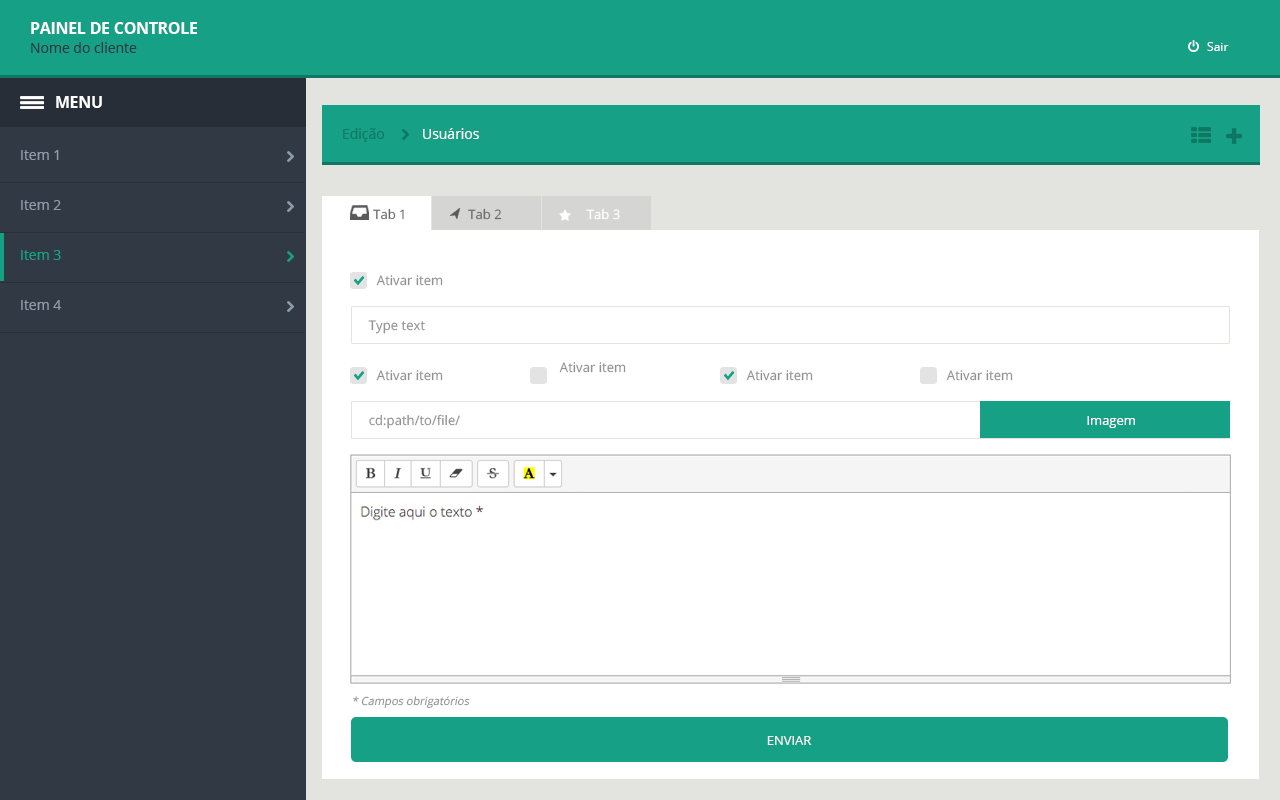
<style>
.page{position:relative;width:1280px;height:800px;background:#ffffff}
.page>*{position:absolute;margin:0}
.t1{font:15.5px "OpenSans-Bold";color:#ffffff}
.t2{font:14px "OpenSans";color:#2c3945}
.t3{font:12.1px "OpenSans";color:#ffffff}
.t4{font:14px "OpenSans";color:#0f7763}
.t5{font:14px "OpenSans";color:#fefefe}
.t6{font:14px "OpenSans";color:#8f9ba7}
.t7{font:12.9px "OpenSans";color:#6a6a6a}
.t8{font:12.9px "OpenSans";color:#ffffff}
.t9{font:14px "OpenSans";color:#16a085}
.t10{font:13.2px "OpenSans";color:#929292}
.t11{font:13px "OpenSans";color:#ffffff}
.t12{font:11.2px "OpenSans";color:#929292;font-style:italic}
.t13{font:13px "OpenSans";color:#f6f6f6}
</style>
<div class="page">
<p class="t1" style="left:31px;top:22px;width:166px;height:12px">PAINEL DE CONTROLE</p>
<p class="t2" style="left:31px;top:42px;width:106px;height:11px">Nome do cliente</p>
<p class="t3" style="left:1207px;top:42px;width:22px;height:9px">Sair</p>
<p class="t1" style="left:56px;top:96px;width:46px;height:12px">MENU</p>
<p class="t4" style="left:343px;top:128px;width:41px;height:14px">Edição</p>
<p class="t5" style="left:423px;top:128px;width:56px;height:11px">Usuários</p>
<p class="t6" style="left:21px;top:150px;width:38px;height:10px">Item 1</p>
<p class="t6" style="left:21px;top:200px;width:40px;height:10px">Item 2</p>
<p class="t7" style="left:373px;top:208px;width:31px;height:12px">Tab 1</p>
<p class="t7" style="left:468px;top:208px;width:34px;height:12px">Tab 2</p>
<p class="t8" style="left:586px;top:208px;width:34px;height:12px">Tab 3</p>
<p class="t9" style="left:21px;top:250px;width:40px;height:10px">Item 3</p>
<p class="t10" style="left:376px;top:275px;width:67px;height:11px">Ativar item</p>
<p class="t6" style="left:21px;top:300px;width:41px;height:10px">Item 4</p>
<p class="t10" style="left:368px;top:320px;width:57px;height:14px">Type text</p>
<p class="t10" style="left:559px;top:362px;width:67px;height:11px">Ativar item</p>
<p class="t10" style="left:376px;top:370px;width:67px;height:11px">Ativar item</p>
<p class="t10" style="left:746px;top:370px;width:67px;height:11px">Ativar item</p>
<p class="t10" style="left:946px;top:370px;width:67px;height:11px">Ativar item</p>
<p class="t10" style="left:369px;top:414px;width:91px;height:15px">cd:path/to/file/</p>
<p class="t11" style="left:1087px;top:416px;width:48px;height:12px">Imagem</p>
<p class="t12" style="left:353px;top:696px;width:117px;height:12px">* Campos obrigatórios</p>
<p class="t13" style="left:767px;top:736px;width:45px;height:9px">ENVIAR</p>
</div>
